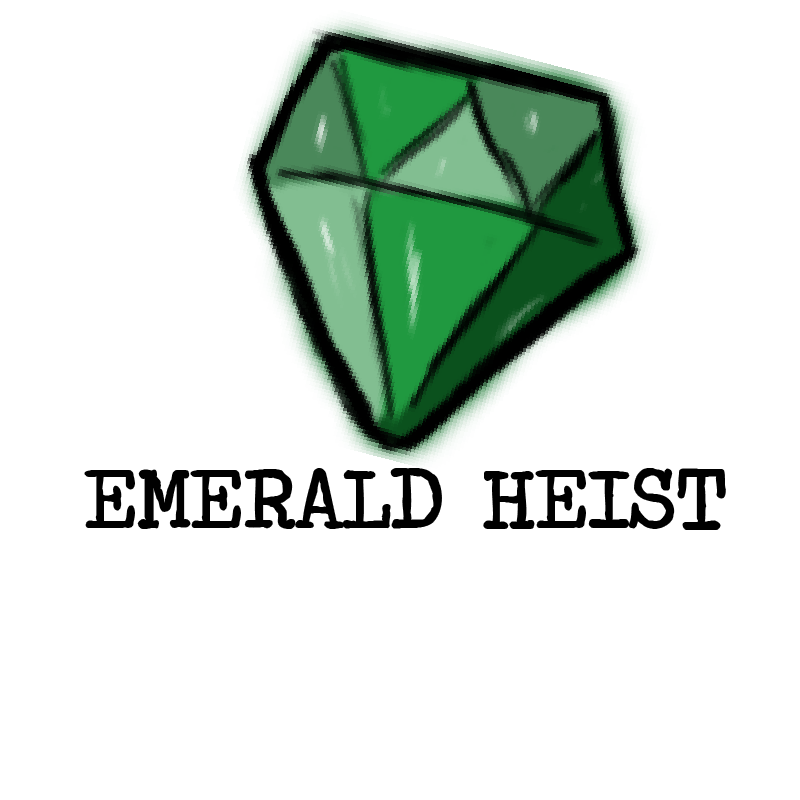
<style>
.page{position:relative;width:800px;height:800px;background:#ffffff}
.page>*{position:absolute;margin:0}
.t1{font:87.5px "TravelingTypewriter";color:#000000}
</style>
<div class="page">
<p class="t1" style="left:86px;top:470px;width:638px;height:58px">EMERALD HEIST</p>
</div>
